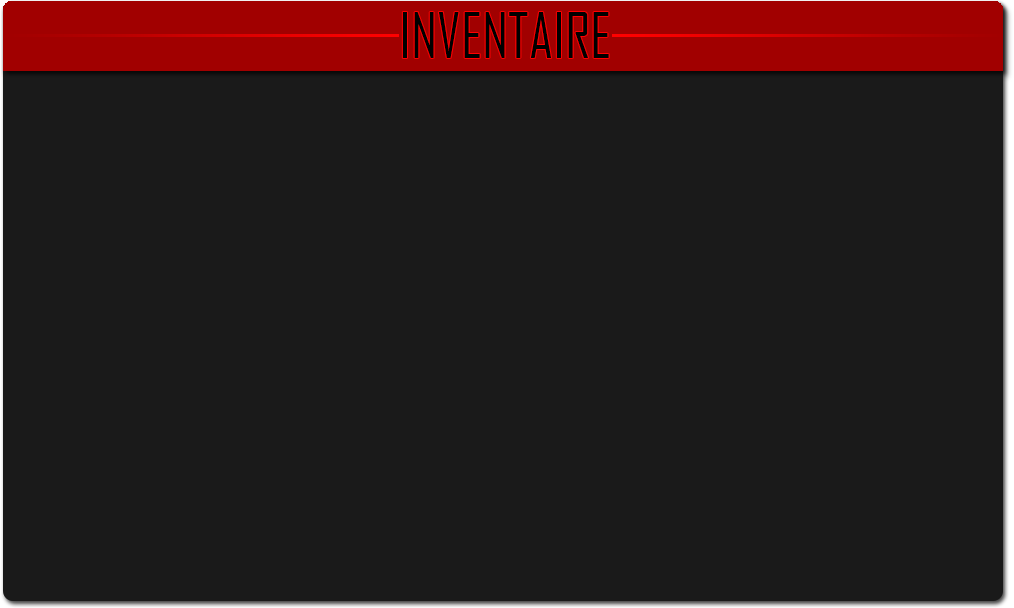
<style>
.page{position:relative;width:1014px;height:608px;background:#1a1a1a}
.page>*{position:absolute;margin:0}
.t1{font:60px "AgencyFB-Reg";color:#000000}
</style>
<div class="page">
<p class="t1" style="left:402px;top:12px;width:207px;height:46px">INVENTAIRE</p>
</div>
